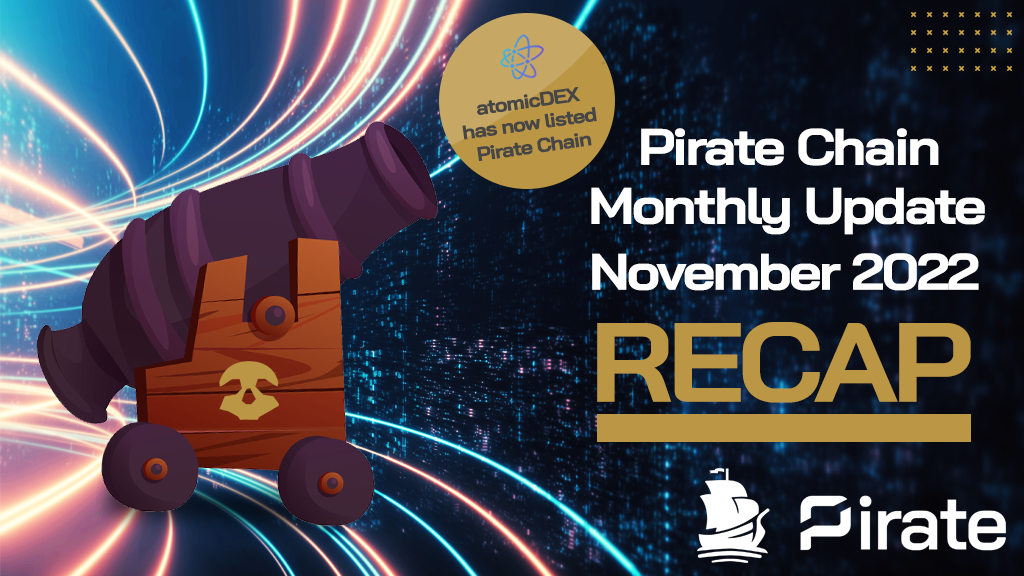
<style>
.page{position:relative;width:1024px;height:576px}
.page>*{position:absolute;margin:0}
.t1{font:19.7px "BaiJamjuree-Bold";letter-spacing:-0.05em;color:#474646;scale:1.1 1}
.t2{font:51.2px "BaiJamjuree-Bold";letter-spacing:-0.05em;color:#ffffff;scale:1.1 1}
.t3{font:112.1px "BaiJamjuree-Bold";letter-spacing:-0.05em;color:#bb9645;scale:1.1 1}
</style>
<div class="page">
<p class="t1" style="left:477px;top:87px;width:104px;height:28px;rotate:-8deg">atomicDEX</p>
<p class="t1" style="left:462px;top:107px;width:135px;height:33px;rotate:-8deg">has now listed</p>
<p class="t1" style="left:477px;top:133px;width:115px;height:29px;rotate:-8deg">Pirate Chain</p>
<p class="t2" style="left:641px;top:128px;width:298px;height:38px">Pirate Chain</p>
<p class="t2" style="left:591px;top:187px;width:394px;height:48px">Monthly Update</p>
<p class="t2" style="left:592px;top:253px;width:387px;height:38px">November 2022</p>
<p class="t3" style="left:597px;top:322px;width:374px;height:81px">RECAP</p>
</div>
